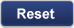
<style>
.page{position:relative;width:74px;height:28px}
.page>*{position:absolute;margin:0}
.t1{font:14px "Arial-BoldMT";color:#ffffff}
</style>
<div class="page">
<p class="t1" style="left:17px;top:8px;width:38px;height:11px">Reset</p>
</div>
